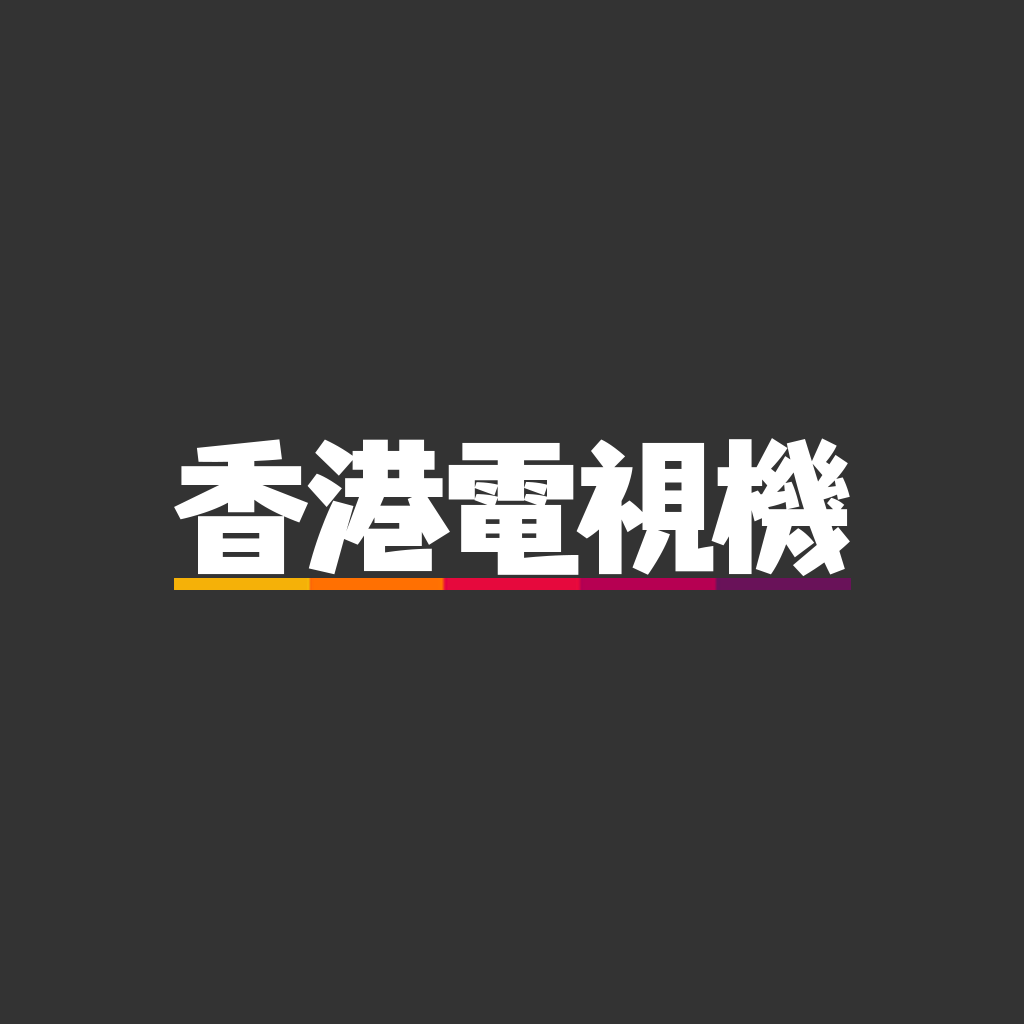
<style>
.page{position:relative;width:1024px;height:1024px;background:#333333}
.page>*{position:absolute;margin:0}
.t1{font:150px "KurokaneStd-EB";letter-spacing:-0.1em;color:#ffffff}
</style>
<div class="page">
<p class="t1" style="left:174px;top:438px;width:676px;height:139px">香港電視機</p>
</div>
